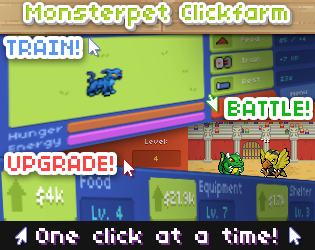
<style>
.page{position:relative;width:315px;height:250px}
.page>*{position:absolute;margin:0}
.t1{font:24px "04b03";color:#a5d621}
.t2{font:24px "04b03";color:#5896f3}
.t3{font:24px "04b03";color:#12b717}
.t4{font:24px "04b03";color:#ff4242}
.t5{font:24px "04b03";color:#ffffff}
</style>
<div class="page">
<p class="t1" style="left:26px;top:5px;width:261px;height:21px">Monsterpet Clickfarm</p>
<p class="t2" style="left:7px;top:40px;width:72px;height:15px">TRAIN!</p>
<p class="t3" style="left:228px;top:101px;width:81px;height:15px">BATTLE!</p>
<p class="t4" style="left:8px;top:156px;width:105px;height:15px">UPGRADE!</p>
<p class="t5" style="left:36px;top:228px;width:240px;height:15px">One click at a time!</p>
</div>
